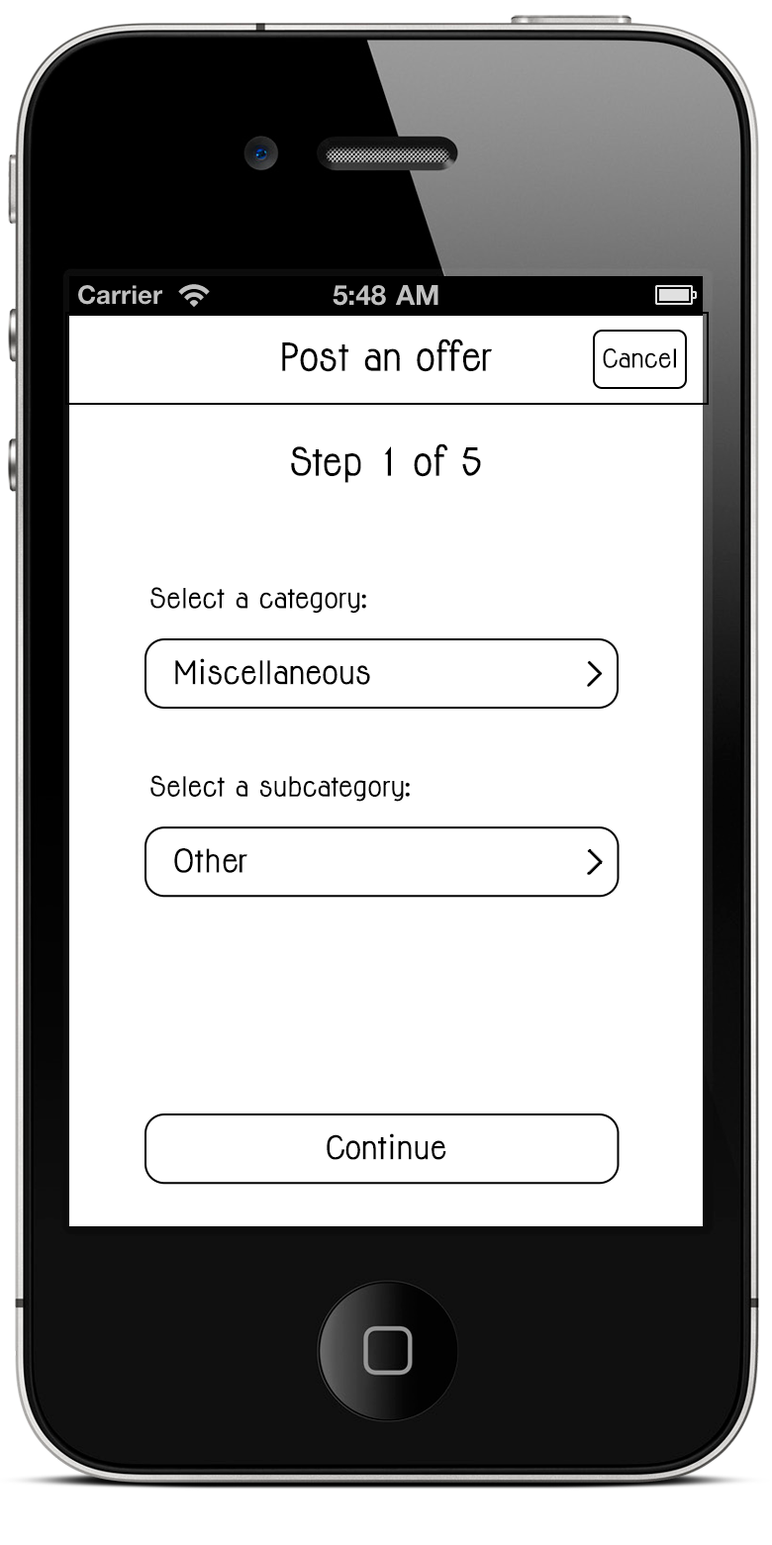
<style>
.page{position:relative;width:772px;height:1545px;background:#ffffff}
.page>*{position:absolute;margin:0}
.t1{font:35.6px "Jolly-Bold";color:#000000}
.t2{font:23.8px "Jolly-Bold";color:#000000}
.t3{font:25.5px "Jolly-Bold";color:#000000}
.t4{font:29.7px "Jolly-Bold";color:#000000}
.t5{font:25.6px "Jolly-Bold";color:#000000}
.t6{font:29.8px "Jolly-Bold";color:#000000}
</style>
<div class="page">
<p class="t1" style="left:282px;top:338px;width:210px;height:34px">Post an offer</p>
<p class="t2" style="left:603px;top:348px;width:73px;height:20px">Cancel</p>
<p class="t1" style="left:291px;top:443px;width:190px;height:40px">Step 1 of 5</p>
<p class="t3" style="left:150px;top:587px;width:216px;height:27px">Select a category:</p>
<p class="t4" style="left:175px;top:658px;width:195px;height:27px">Miscellaneous</p>
<p class="t5" style="left:150px;top:775px;width:260px;height:27px">Select a subcategory:</p>
<p class="t6" style="left:174px;top:848px;width:73px;height:25px">Other</p>
<p class="t6" style="left:327px;top:1133px;width:119px;height:27px">Continue</p>
</div>
